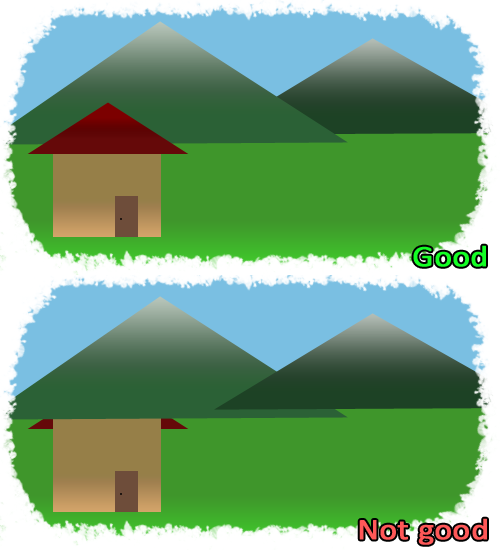
<style>
.page{position:relative;width:500px;height:550px;background:#3f962b}
.page>*{position:absolute;margin:0}
.t1{font:30px "Calibri";color:#14ff25;font-weight:bold;scale:1.1 1}
.t2{font:30px "Calibri";color:#ff5858;font-weight:bold;scale:1.1 1}
</style>
<div class="page">
<p class="t1" style="left:413px;top:245px;width:73px;height:22px">Good</p>
<p class="t2" style="left:359px;top:518px;width:128px;height:27px">Not good</p>
</div>
